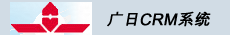
<style>
.page{position:relative;width:230px;height:35px;background:#d1dce5}
.page>*{position:absolute;margin:0}
.t1{font:16px "ArialMT";color:#000000;font-weight:bold;font-style:italic}
.t2{font:16px "ArialUnicodeMS";color:#000000;font-weight:bold;font-style:italic}
</style>
<div class="page">
<p class="t1" style="left:107px;top:11px;width:104px;height:16px"><span class="t2">广日</span>CRM<span class="t2">系统</span></p>
</div>
